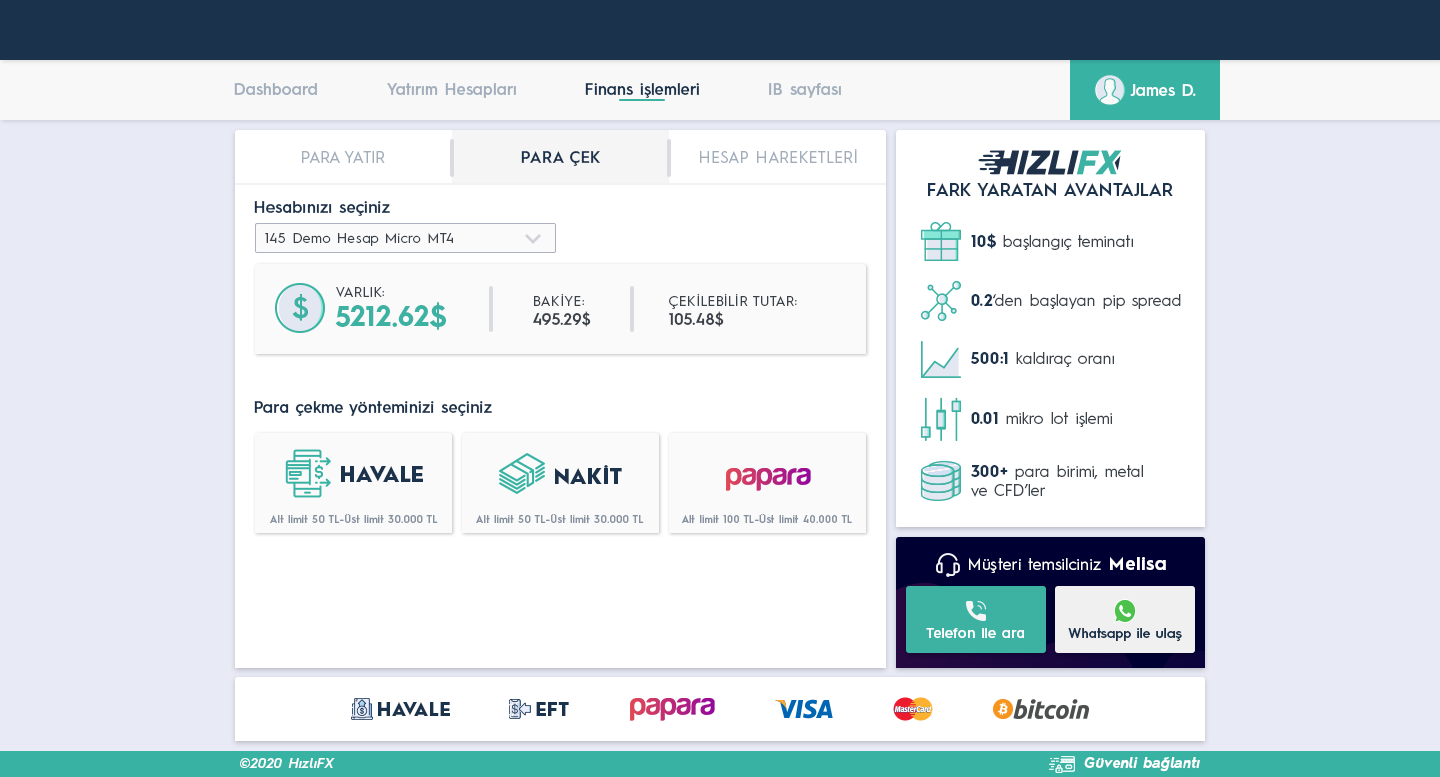
<style>
.page{position:relative;width:1440px;height:777px;background:#ffffff}
.page>*{position:absolute;margin:0}
.t1{font:16px "HurmeGeometricSans3-SemiBold";color:#a1adbb}
.t2{font:16px "HurmeGeometricSans3-SemiBold";color:#1a324c}
.t3{font:16px "HurmeGeometricSans3-SemiBold";color:#fefefe}
.t4{font:16px "HurmeGeometricSans1-Regular";letter-spacing:0.01em;color:#a1adbb}
.t5{font:16px "HurmeGeometricSans1-SemiBold";letter-spacing:0.01em;color:#1a324c}
.t6{font:18px "HurmeGeometricSans1-SemiBold";color:#1a324c}
.t7{font:16px "HurmeGeometricSans3-SemiBold";letter-spacing:0.01em;color:#1a324c}
.t8{font:14px "HurmeGeometricSans1-Regular";letter-spacing:0.025em;color:#3a4149}
.t9{font:16px "HurmeGeometricSans1-Regular";color:#3a4149}
.t10{font:16px "HurmeGeometricSans1-Bold";color:#1a324c}
.t11{font:29.2px "HurmeGeometricSans2-SemiBold";letter-spacing:0.01em;color:#3db2a3}
.t12{font:14px "HurmeGeometricSans1-Regular";letter-spacing:0.01em;color:#3a4149}
.t13{font:16px "HurmeGeometricSans1-SemiBold";letter-spacing:0.01em;color:#3a4149}
.t14{font:28px "HurmeGeometricSans1-Bold";letter-spacing:0.01em;color:#3db2a3}
.t15{font:21px "HurmeGeometricSans1-Black";letter-spacing:0.025em;color:#1a324c}
.t16{font:10px "HurmeGeometricSans1-SemiBold";letter-spacing:0.05em;color:#85919e}
.t17{font:16px "HurmeGeometricSans1-Regular";letter-spacing:0.025em;color:#ffffff}
.t18{font:18px "HurmeGeometricSans1-Bold";letter-spacing:0.05em;color:#ffffff}
.t19{font:14px "HurmeGeometricSans3-SemiBold";letter-spacing:0.01em;color:#ffffff}
.t20{font:13.5px "HurmeGeometricSans3-SemiBold";letter-spacing:0.01em;color:#1a324c}
.t21{font:18px "HurmeGeometricSans1-Black";letter-spacing:0.025em;color:#1a324c}
.t22{font:14px "HurmeGeometricSans2-SemiBoldObl";letter-spacing:0.025em;color:#ffffff}
.t23{font:14px "HurmeGeometricSans2-BoldObl";letter-spacing:0.025em;color:#ffffff}
</style>
<div class="page">
<p class="t1" style="left:234px;top:83px;width:83px;height:12px">Dashboard</p>
<p class="t1" style="left:387px;top:83px;width:129px;height:15px">Yatırım Hesapları</p>
<p class="t2" style="left:585px;top:83px;width:114px;height:15px">Finans işlemleri</p>
<p class="t1" style="left:769px;top:83px;width:72px;height:15px">IB sayfası</p>
<p class="t3" style="left:1130px;top:84px;width:66px;height:12px">James D.</p>
<p class="t4" style="left:700px;top:149px;width:157px;height:14px">HESAP HAREKETLERİ</p>
<p class="t4" style="left:302px;top:151px;width:83px;height:12px">PARA YATIR</p>
<p class="t5" style="left:521px;top:151px;width:79px;height:15px">PARA ÇEK</p>
<p class="t6" style="left:928px;top:183px;width:245px;height:13px">FARK YARATAN AVANTAJLAR</p>
<p class="t7" style="left:254px;top:201px;width:136px;height:15px">Hesabınızı seçiniz</p>
<p class="t8" style="left:265px;top:233px;width:188px;height:13px">145 Demo Hesap Micro MT4</p>
<p class="t9" style="left:971px;top:233px;width:162px;height:17px"><span class="t10">10$</span> başlangıç teminatı</p>
<p class="t11" style="left:292px;top:294px;width:17px;height:27px">$</p>
<p class="t12" style="left:336px;top:287px;width:48px;height:10px">VARLIK:</p>
<p class="t12" style="left:533px;top:294px;width:58px;height:33px">BAKİYE:<br><span class="t13">495.29$</span></p>
<p class="t12" style="left:669px;top:294px;width:128px;height:33px">ÇEKİLEBİLİR TUTAR:<br><span class="t13">105.48$</span></p>
<p class="t9" style="left:971px;top:294px;width:210px;height:15px"><span class="t10">0.2</span>‘den başlayan pip spread</p>
<p class="t14" style="left:335px;top:302px;width:111px;height:28px">5212.62$</p>
<p class="t9" style="left:970px;top:352px;width:144px;height:15px"><span class="t10">500:1</span> kaldıraç oranı</p>
<p class="t7" style="left:254px;top:401px;width:238px;height:15px">Para çekme yönteminizi seçiniz</p>
<p class="t9" style="left:971px;top:412px;width:141px;height:15px"><span class="t10">0.01</span> mikro lot işlemi</p>
<p class="t15" style="left:341px;top:466px;width:82px;height:16px">HAVALE</p>
<p class="t15" style="left:555px;top:465px;width:67px;height:20px">NAKİT</p>
<p class="t9" style="left:971px;top:465px;width:172px;height:32px"><span class="t10">300+</span> para birimi, metal<br>ve CFD’ler</p>
<p class="t16" style="left:270px;top:514px;width:168px;height:9px">Alt limit 50 TL-Üst limit 30.000 TL</p>
<p class="t16" style="left:476px;top:514px;width:168px;height:9px">Alt limit 50 TL-Üst limit 30.000 TL</p>
<p class="t16" style="left:682px;top:514px;width:170px;height:9px">Alt limit 100 TL-Üst limit 40.000 TL</p>
<p class="t17" style="left:969px;top:557px;width:197px;height:16px">Müşteri temsilciniz <span class="t18">Melisa</span></p>
<p class="t19" style="left:926px;top:628px;width:98px;height:10px">Telefon ile ara</p>
<p class="t20" style="left:1068px;top:628px;width:114px;height:13px">Whatsapp ile ulaş</p>
<p class="t21" style="left:378px;top:702px;width:72px;height:14px">HAVALE</p>
<p class="t21" style="left:536px;top:702px;width:33px;height:14px">EFT</p>
<p class="t22" style="left:240px;top:758px;width:95px;height:10px">©2020 HızlıFX</p>
<p class="t23" style="left:1084px;top:757px;width:116px;height:15px">Güvenli bağlantı</p>
</div>
